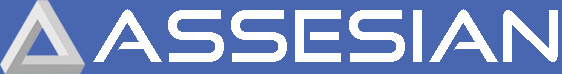
<style>
.page{position:relative;width:562px;height:74px;background:#4966b0}
.page>*{position:absolute;margin:0}
.t1{font:72px "GoodTimesRg-Regular";color:#ffffff}
</style>
<div class="page">
<p class="t1" style="left:93px;top:9px;width:465px;height:53px">ASSESIAN</p>
</div>
